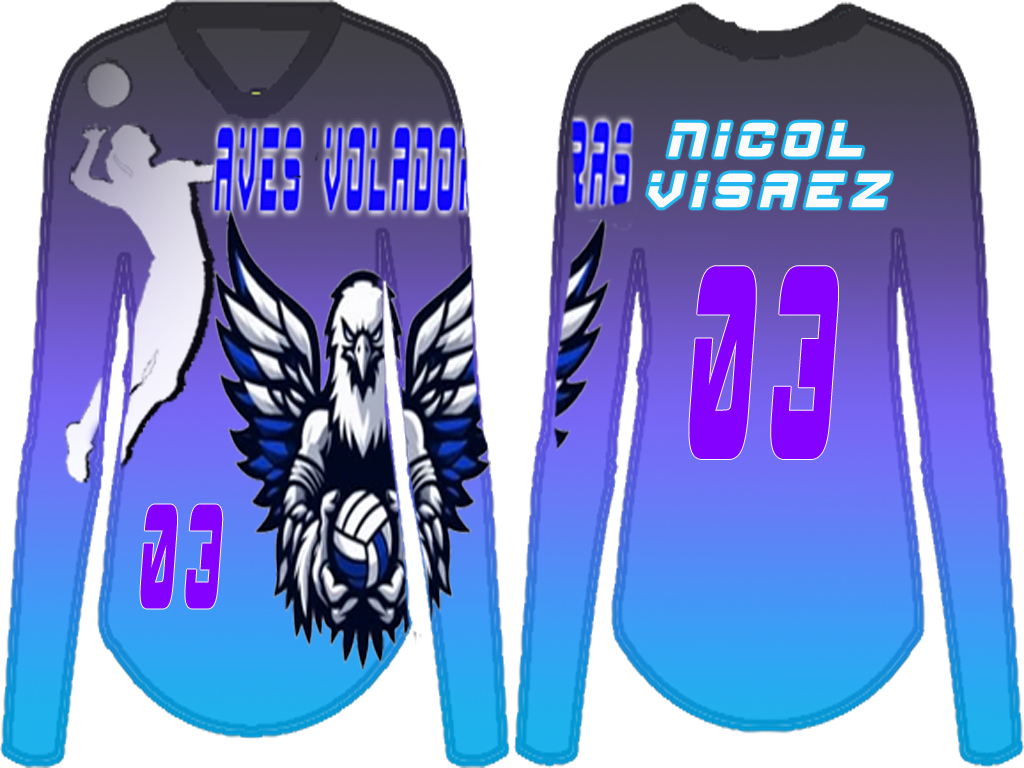
<style>
.page{position:relative;width:1024px;height:768px;background:#ffffff}
.page>*{position:absolute;margin:0}
.t1{font:42.2px "ESP_Italic";letter-spacing:0.2em;color:#fdfafa;scale:1.08 1}
.t2{font:240.7px "ESP_Italic";letter-spacing:0.2em;color:#8400ff;scale:0.34 1}
.t3{font:129.9px "ESP_Italic";letter-spacing:0.2em;color:#8400ff;scale:0.35 1}
</style>
<div class="page">
<p class="t1" style="left:648px;top:122px;width:243px;height:86px;text-align:center">NICOL<br>VISAEz</p>
<p class="t2" style="left:689px;top:266px;width:149px;height:193px">03</p>
<p class="t3" style="left:140px;top:504px;width:83px;height:105px">03</p>
</div>
